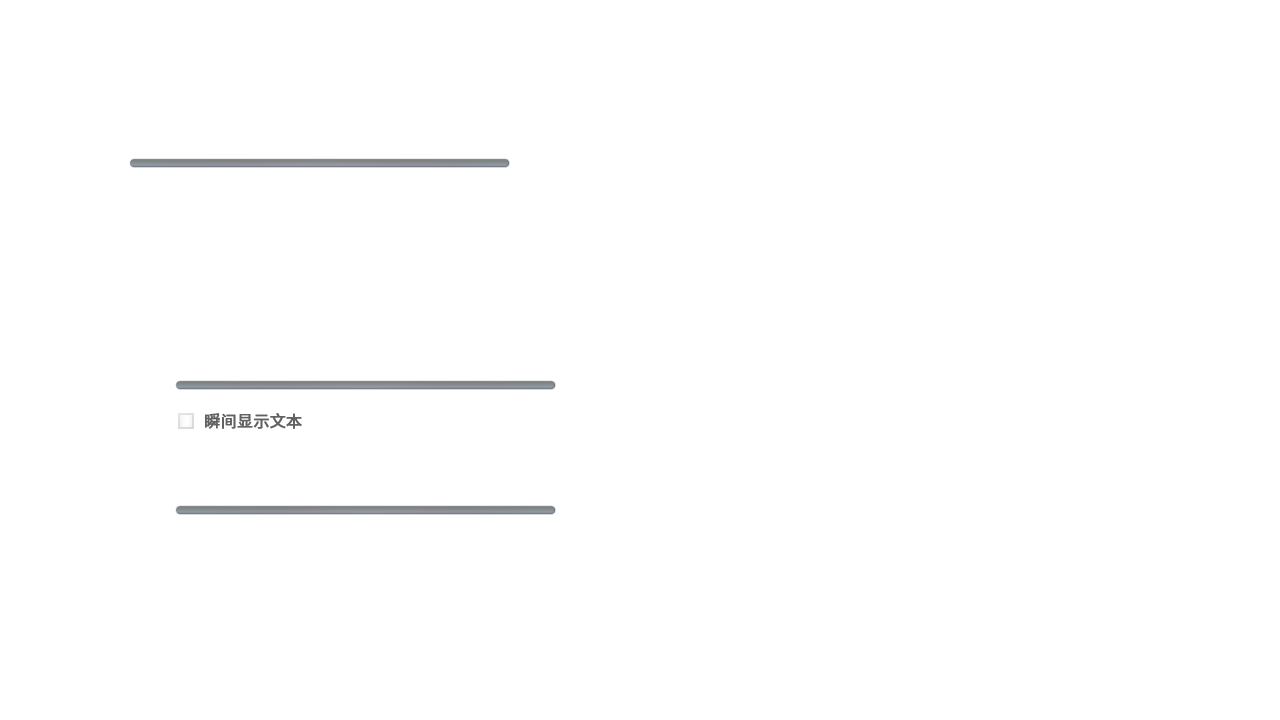
<style>
.page{position:relative;width:1280px;height:720px;background:#ffffff}
.page>*{position:absolute;margin:0}
.t1{font:16px "SourceHanSansSC-Regular";color:#626262;font-weight:bold}
</style>
<div class="page">
<p class="t1" style="left:205px;top:413px;width:97px;height:16px">瞬间显示文本</p>
</div>
